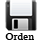
<style>
.page{position:relative;width:42px;height:42px;background:#ffffff}
.page>*{position:absolute;margin:0}
.t1{font:9px "TimesNewRomanPSMT";color:#000000;scale:1.28 1}
</style>
<div class="page">
<p class="t1" style="left:6px;top:32px;width:28px;height:10px">Orden</p>
</div>
